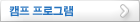
<style>
.page{position:relative;width:140px;height:22px;background:#ffffff}
.page>*{position:absolute;margin:0}
.t1{font:11px "H2gtrE";letter-spacing:-0.025em;color:#2774bf;scale:0.95 1}
</style>
<div class="page">
<p class="t1" style="left:9px;top:6px;width:64px;height:11px">캠프 프로그램</p>
</div>
